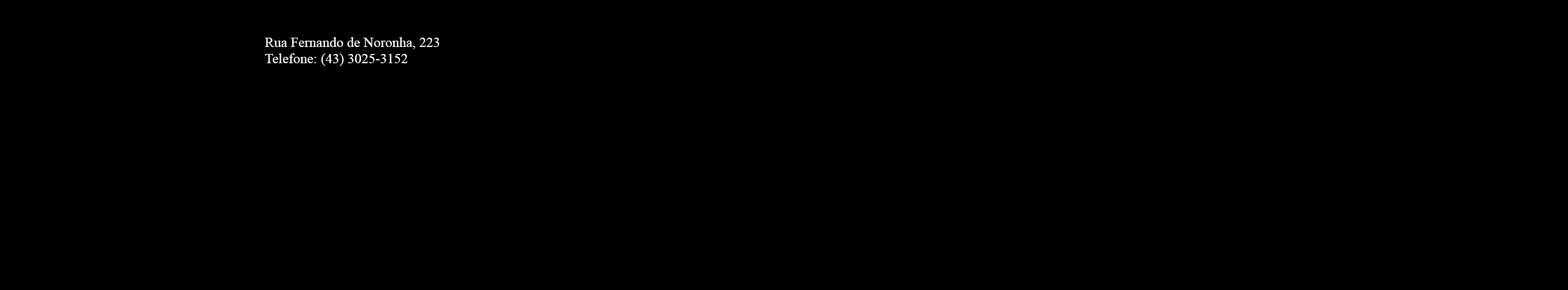
<style>
.page{position:relative;width:1568px;height:290px;background:#000000}
.page>*{position:absolute;margin:0}
.t1{font:13.9px "TimesNewRomanPSMT";color:#ffffff}
</style>
<div class="page">
<p class="t1" style="left:265px;top:37px;width:175px;height:29px">Rua Fernando de Noronha, 223<br>Telefone: (43) 3025-3152</p>
</div>
